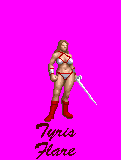
<style>
.page{position:relative;width:121px;height:160px;background:#ff00ff}
.page>*{position:absolute;margin:0}
.t1{font:19px "BrushScriptStd";color:#4c0505}
</style>
<div class="page">
<p class="t1" style="left:36px;top:123px;width:40px;height:18px">Tyris</p>
<p class="t1" style="left:35px;top:142px;width:41px;height:17px">Flare</p>
</div>
